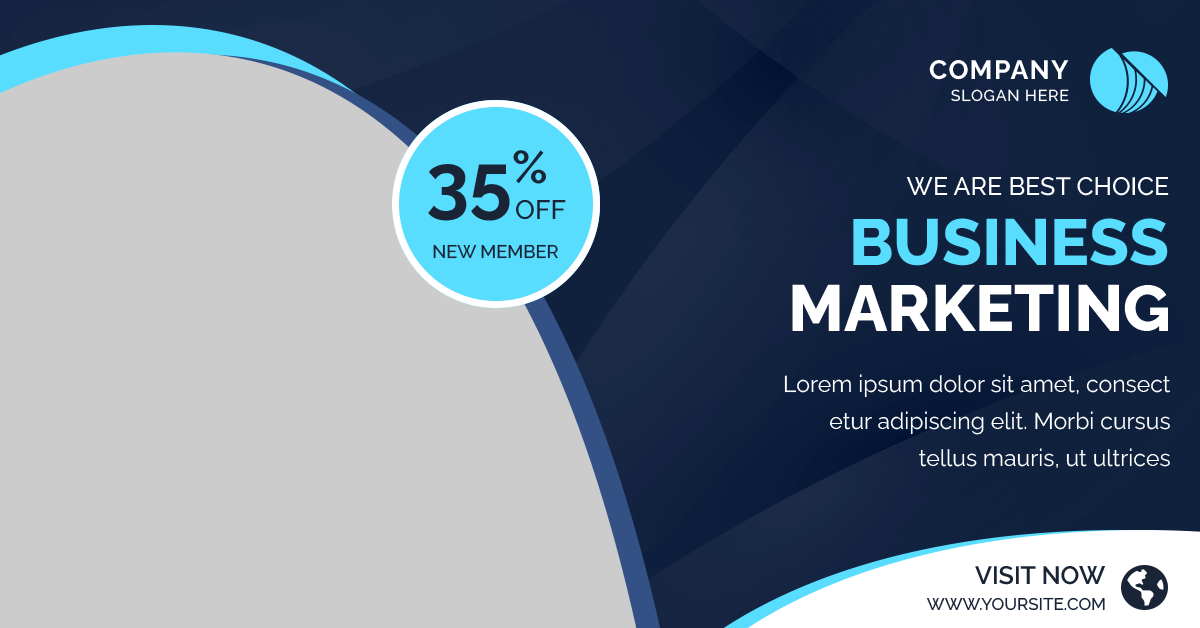
<style>
.page{position:relative;width:1200px;height:628px;background:#cccccc}
.page>*{position:absolute;margin:0}
.t1{font:26.4px "Raleway-Bold";letter-spacing:0.05em;color:#ffffff}
.t2{font:15.9px "Raleway-Medium";letter-spacing:0.05em;color:#ffffff}
.t3{font:77.9px "Raleway-Bold";color:#192437}
.t4{font:25px "Raleway-Medium";color:#ffffff}
.t5{font:26.7px "Raleway-Medium";color:#192437}
.t6{font:65px "Raleway-ExtraBold";color:#58ddfe}
.t7{font:18.3px "Raleway-Medium";color:#192437}
.t8{font:65px "Raleway-ExtraBold";color:#ffffff}
.t9{font:23px/37px "Raleway-Regular";color:#ffffff}
.t10{font:25px "Raleway-SemiBold";color:#192437}
.t11{font:17px "Raleway-Medium";color:#192437}
</style>
<div class="page">
<p class="t1" style="left:929px;top:60px;width:140px;height:20px">COMPANY</p>
<p class="t2" style="left:951px;top:89px;width:118px;height:13px">SLOGAN HERE</p>
<p class="t3" style="left:428px;top:150px;width:118px;height:71px">35%</p>
<p class="t4" style="left:906px;top:177px;width:263px;height:19px">WE ARE BEST CHOICE</p>
<p class="t5" style="left:516px;top:200px;width:50px;height:20px">OFF</p>
<p class="t6" style="left:853px;top:218px;width:315px;height:48px">BUSINESS</p>
<p class="t7" style="left:433px;top:244px;width:125px;height:15px">NEW MEMBER</p>
<p class="t8" style="left:792px;top:284px;width:376px;height:47px">MARKETING</p>
<p class="t9" style="left:784px;top:374px;width:387px;height:94px;text-align:right">Lorem ipsum dolor sit amet, consect etur adipiscing elit. Morbi cursus tellus mauris, ut ultrices</p>
<p class="t10" style="left:975px;top:566px;width:131px;height:19px">VISIT NOW</p>
<p class="t11" style="left:927px;top:597px;width:178px;height:14px">WWW.YOURSITE.COM</p>
</div>
